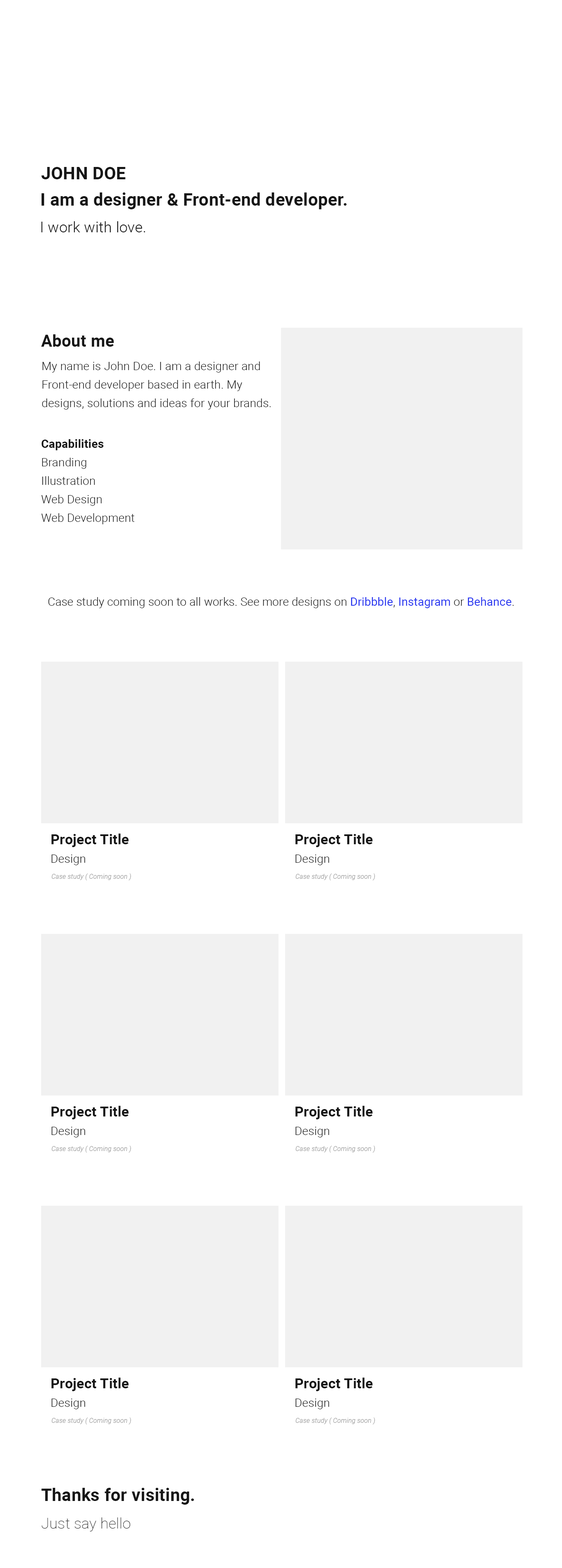
<style>
.page{position:relative;width:562px;height:1568px;background:#ffffff}
.page>*{position:absolute;margin:0}
.t1{font:17.3px "Roboto-Bold";letter-spacing:0.012em;color:#161616}
.t2{font:14.8px "Roboto-Light";letter-spacing:0.012em;color:#161616}
.t3{font:16.4px "Roboto-Bold";letter-spacing:0.012em;color:#161616}
.t4{font:11.5px/18.5px "Roboto-Light";letter-spacing:0.012em;color:#161616}
.t5{font:11.5px/18.5px "Roboto-Bold";letter-spacing:0.012em;color:#161616}
.t6{font:11.5px "Roboto-Light";letter-spacing:0.012em;color:#161616}
.t7{font:11.5px "Roboto-Regular";letter-spacing:0.012em;color:#2937f0}
.t8{font:14px "Roboto-Bold";letter-spacing:0.012em;color:#161616}
.t9{font:6.6px "Roboto-LightItalic";letter-spacing:0.012em;color:#969696}
.t10{font:14.8px "Roboto-Thin";letter-spacing:0.012em;color:#161616}
</style>
<div class="page">
<p class="t1" style="left:41px;top:167px;width:84px;height:12px">JOHN DOE</p>
<p class="t1" style="left:42px;top:192px;width:305px;height:17px">I am a designer &amp; Front-end developer.</p>
<p class="t2" style="left:41px;top:221px;width:104px;height:11px">I work with love.</p>
<p class="t3" style="left:41px;top:334px;width:73px;height:13px">About me</p>
<p class="t4" style="left:42px;top:361px;width:229px;height:49px">My name is John Doe. I am a designer and Front-end developer based in earth. My <br>designs, solutions and ideas for your brands.</p>
<p class="t4" style="left:41px;top:439px;width:93px;height:85px"><span class="t5">Capabilities<br></span>Branding<br>Illustration<br>Web Design<br>Web Development</p>
<p class="t6" style="left:48px;top:597px;width:466px;height:11px">Case study coming soon to all works. See more designs on <span class="t7">Dribbble</span>, <span class="t7">Instagram</span> or <span class="t7">Behance</span>.</p>
<p class="t8" style="left:51px;top:834px;width:78px;height:13px">Project Title</p>
<p class="t8" style="left:295px;top:834px;width:78px;height:13px">Project Title</p>
<p class="t6" style="left:51px;top:855px;width:34px;height:10px">Design</p>
<p class="t6" style="left:295px;top:855px;width:34px;height:10px">Design</p>
<p class="t9" style="left:51px;top:873px;width:80px;height:7px">Case study ( Coming soon )</p>
<p class="t9" style="left:295px;top:873px;width:80px;height:7px">Case study ( Coming soon )</p>
<p class="t8" style="left:51px;top:1106px;width:78px;height:13px">Project Title</p>
<p class="t8" style="left:295px;top:1106px;width:78px;height:13px">Project Title</p>
<p class="t6" style="left:51px;top:1127px;width:34px;height:10px">Design</p>
<p class="t6" style="left:295px;top:1127px;width:34px;height:10px">Design</p>
<p class="t9" style="left:51px;top:1146px;width:80px;height:7px">Case study ( Coming soon )</p>
<p class="t9" style="left:295px;top:1146px;width:80px;height:7px">Case study ( Coming soon )</p>
<p class="t8" style="left:51px;top:1378px;width:78px;height:13px">Project Title</p>
<p class="t8" style="left:295px;top:1378px;width:78px;height:13px">Project Title</p>
<p class="t6" style="left:51px;top:1399px;width:34px;height:10px">Design</p>
<p class="t6" style="left:295px;top:1399px;width:34px;height:10px">Design</p>
<p class="t9" style="left:51px;top:1417px;width:80px;height:7px">Case study ( Coming soon )</p>
<p class="t9" style="left:295px;top:1417px;width:80px;height:7px">Case study ( Coming soon )</p>
<p class="t1" style="left:41px;top:1488px;width:153px;height:17px">Thanks for visiting.</p>
<p class="t10" style="left:42px;top:1517px;width:88px;height:14px">Just say hello</p>
</div>
